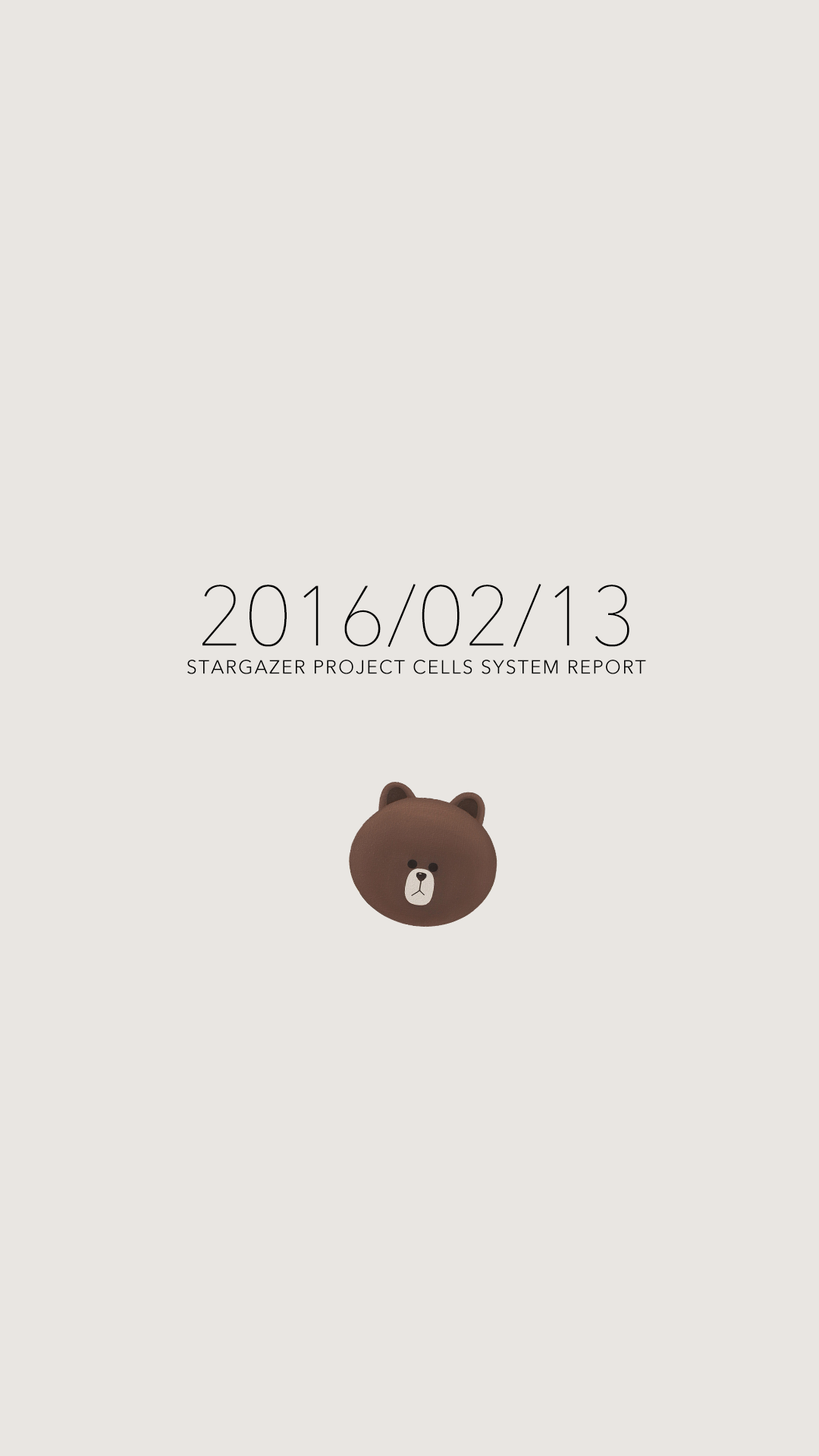
<style>
.page{position:relative;width:819px;height:1456px;background:#e9e6e2}
.page>*{position:absolute;margin:0}
.t1{font:84.3px "AvenirNext-UltraLight";color:#000000}
.t2{font:19px "AvenirNext-Regular";letter-spacing:0.075em;color:#000000}
</style>
<div class="page">
<p class="t1" style="left:202px;top:584px;width:427px;height:63px">2016/02/13</p>
<p class="t2" style="left:187px;top:660px;width:459px;height:14px">STARGAZER PROJECT CELLS SYSTEM REPORT</p>
</div>
